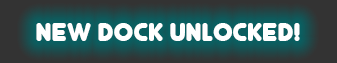
<style>
.page{position:relative;width:337px;height:63px;background:#333333}
.page>*{position:absolute;margin:0}
.t1{font:30px "Junegull";color:#ffffff}
</style>
<div class="page">
<p class="t1" style="left:36px;top:23px;width:264px;height:18px">new dock unlocked!</p>
</div>
